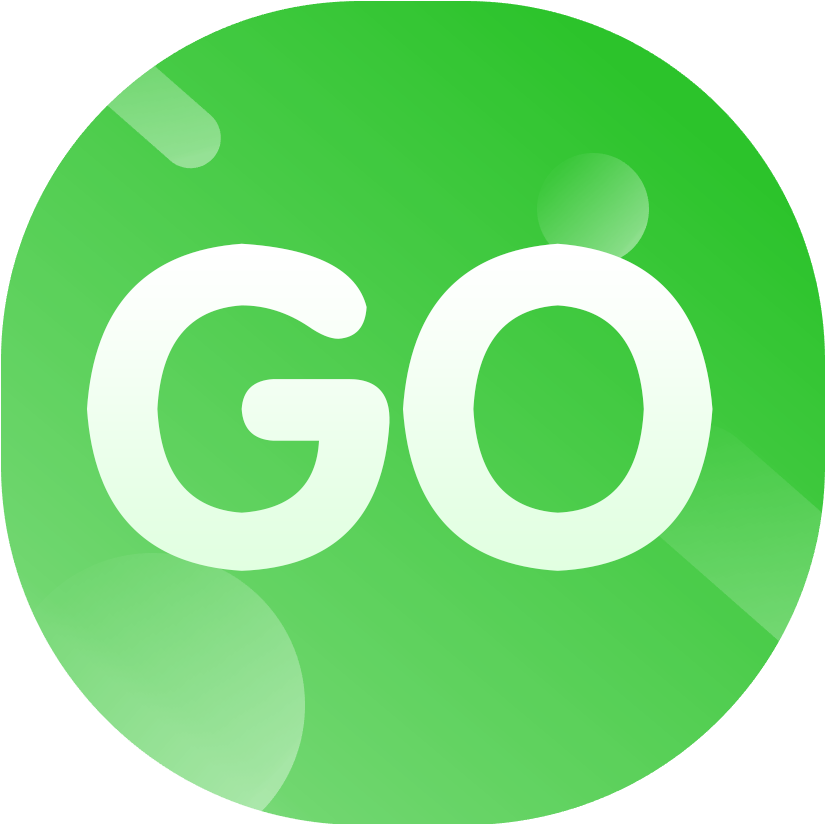
<style>
.page{position:relative;width:826px;height:824px}
.page>*{position:absolute;margin:0}
.t1{font:450px "FZY4JW--GB1-0";color:#f0ffef}
</style>
<div class="page">
<p class="t1" style="left:87px;top:243px;width:626px;height:328px">GO</p>
</div>
